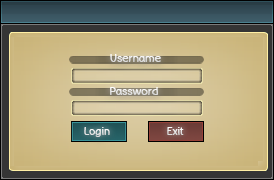
<style>
.page{position:relative;width:274px;height:180px}
.page>*{position:absolute;margin:0}
.t1{font:11.1px "BadComic";color:#ebebeb}
.t2{font:10px "BadComic";color:#e6e6e6}
.t3{font:10px "BadComic";color:#ffffff}
</style>
<div class="page">
<p class="t1" style="left:110px;top:54px;width:51px;height:8px">Username</p>
<p class="t1" style="left:110px;top:87px;width:48px;height:8px">Password</p>
<p class="t2" style="left:84px;top:127px;width:26px;height:10px">Login</p>
<p class="t3" style="left:167px;top:127px;width:17px;height:8px">Exit</p>
</div>
